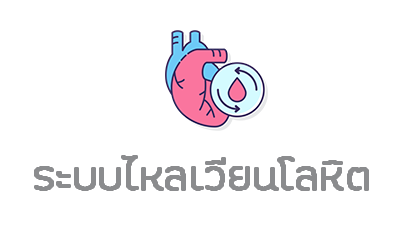
<style>
.page{position:relative;width:400px;height:243px;background:#ffffff}
.page>*{position:absolute;margin:0}
.t1{font:51.1px "FCHomeThin";color:#8b8c8e;font-weight:bold}
</style>
<div class="page">
<p class="t1" style="left:35px;top:156px;width:333px;height:34px">ระบบไหลเวียนโลหิต</p>
</div>
